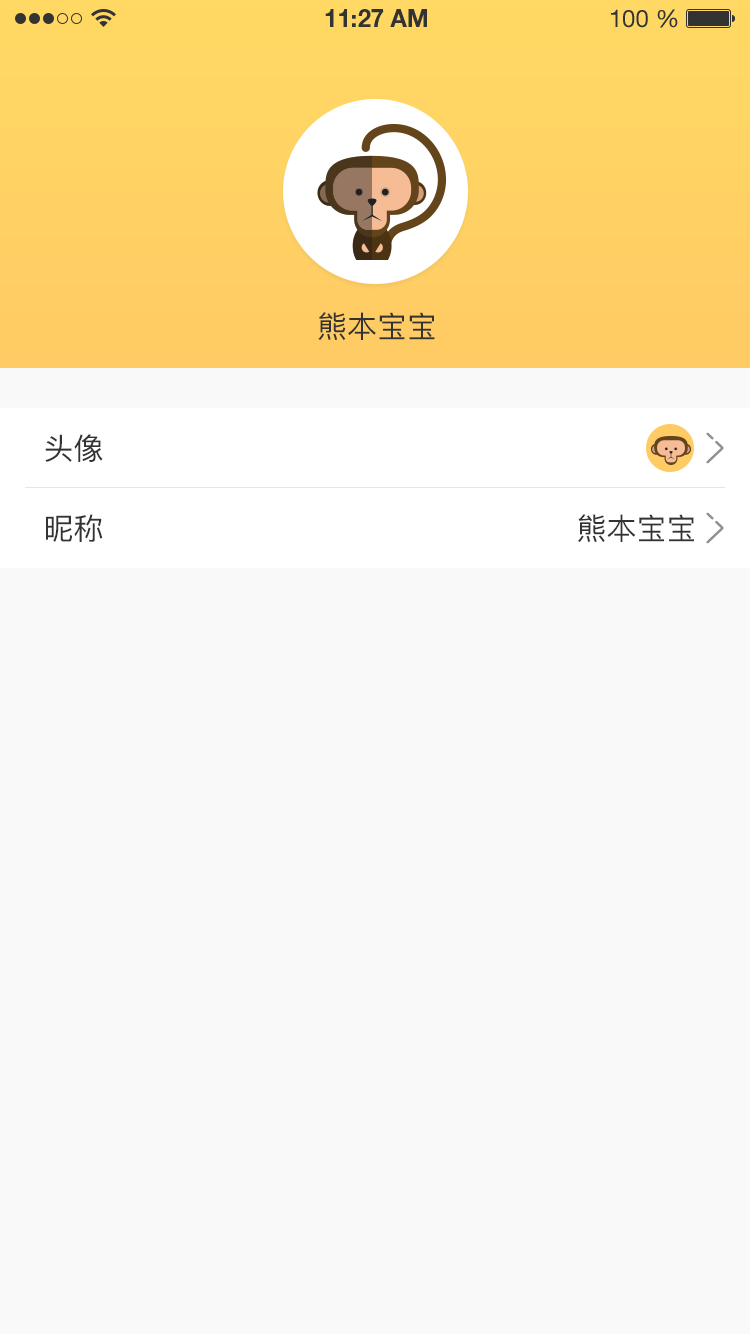
<style>
.page{position:relative;width:750px;height:1334px;background:#f9f9f9}
.page>*{position:absolute;margin:0}
.t1{font:30px "PingFang-SC-Medium";color:#333333;text-transform:uppercase}
</style>
<div class="page">
<p class="t1" style="left:318px;top:312px;width:117px;height:28px">熊本宝宝</p>
<p class="t1" style="left:45px;top:434px;width:58px;height:28px">头像</p>
<p class="t1" style="left:46px;top:514px;width:57px;height:28px">昵称</p>
<p class="t1" style="left:578px;top:514px;width:116px;height:28px">熊本宝宝</p>
</div>
